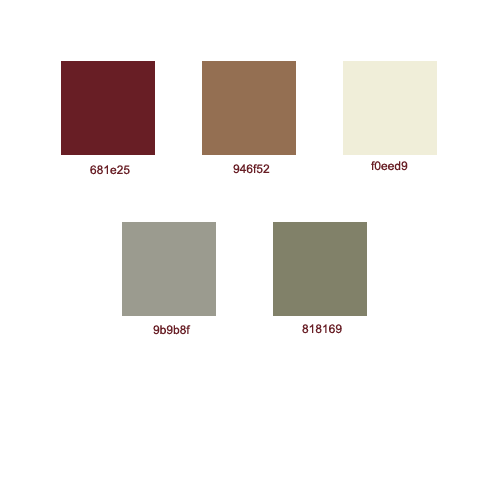
<style>
.page{position:relative;width:500px;height:500px;background:#ffffff}
.page>*{position:absolute;margin:0}
.t1{font:12px "ArialMT";color:#681e25}
</style>
<div class="page">
<p class="t1" style="left:371px;top:161px;width:37px;height:10px">f0eed9</p>
<p class="t1" style="left:90px;top:165px;width:40px;height:10px">681e25</p>
<p class="t1" style="left:233px;top:164px;width:37px;height:10px">946f52</p>
<p class="t1" style="left:153px;top:325px;width:38px;height:10px">9b9b8f</p>
<p class="t1" style="left:302px;top:324px;width:40px;height:10px">818169</p>
</div>
